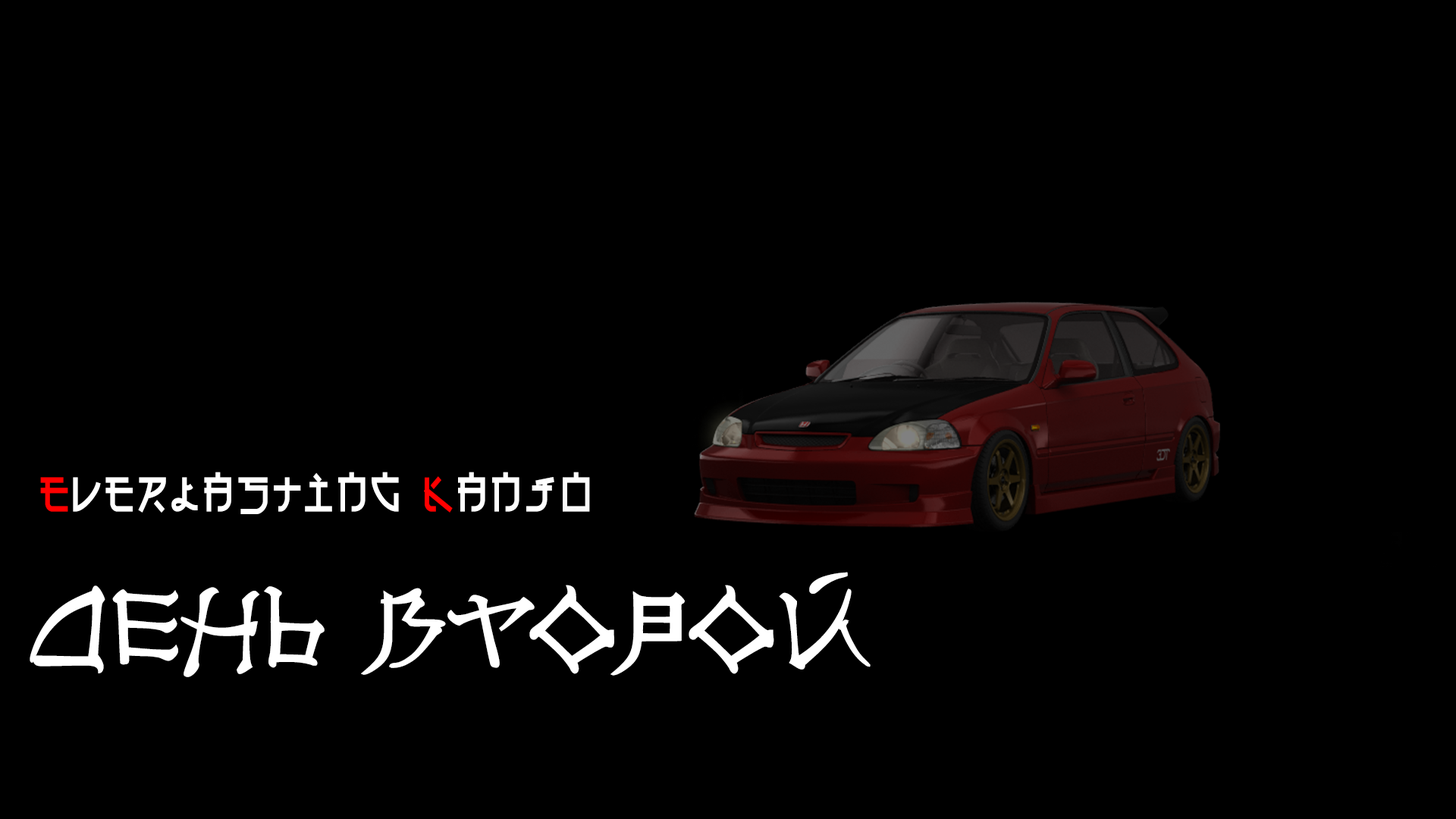
<style>
.page{position:relative;width:1456px;height:819px;background:#000000}
.page>*{position:absolute;margin:0}
.t1{font:54.6px "Eh_cyr";color:#ffffff}
.t2{font:54.6px "Eh_cyr";color:#ff0000}
.t3{font:100.8px "NipponCyr-Bold";color:#ffffff}
</style>
<div class="page">
<p class="t1" style="left:40px;top:472px;width:550px;height:42px"><span class="t2">E</span>VERLAstING <span class="t2">K</span>ANjO</p>
<p class="t3" style="left:30px;top:572px;width:841px;height:105px">ДЕНЬ второй</p>
</div>
